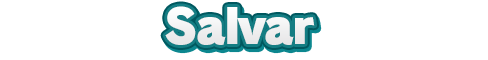
<style>
.page{position:relative;width:488px;height:60px;background:#ffffff}
.page>*{position:absolute;margin:0}
.t1{font:46.9px "RodinPro-UB";letter-spacing:-0.038em;color:#f0f0f1}
</style>
<div class="page">
<p class="t1" style="left:165px;top:6px;width:150px;height:39px">Salvar</p>
</div>
